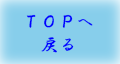
<style>
.page{position:relative;width:120px;height:64px;background:#87ceeb}
.page>*{position:absolute;margin:0}
.t1{font:18px "HGSGyoshotai";color:#0000ff}
</style>
<div class="page">
<p class="t1" style="left:26px;top:14px;width:67px;height:14px">ＴＯＰへ</p>
<p class="t1" style="left:41px;top:37px;width:33px;height:16px">戻る</p>
</div>
